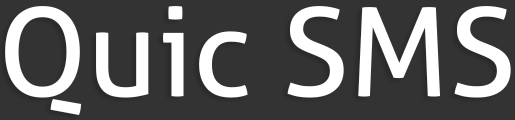
<style>
.page{position:relative;width:515px;height:120px;background:#333333}
.page>*{position:absolute;margin:0}
.t1{font:123.3px "Aller";color:#ffffff}
</style>
<div class="page">
<p class="t1" style="left:5px;top:6px;width:506px;height:109px">Quic SMS</p>
</div>
